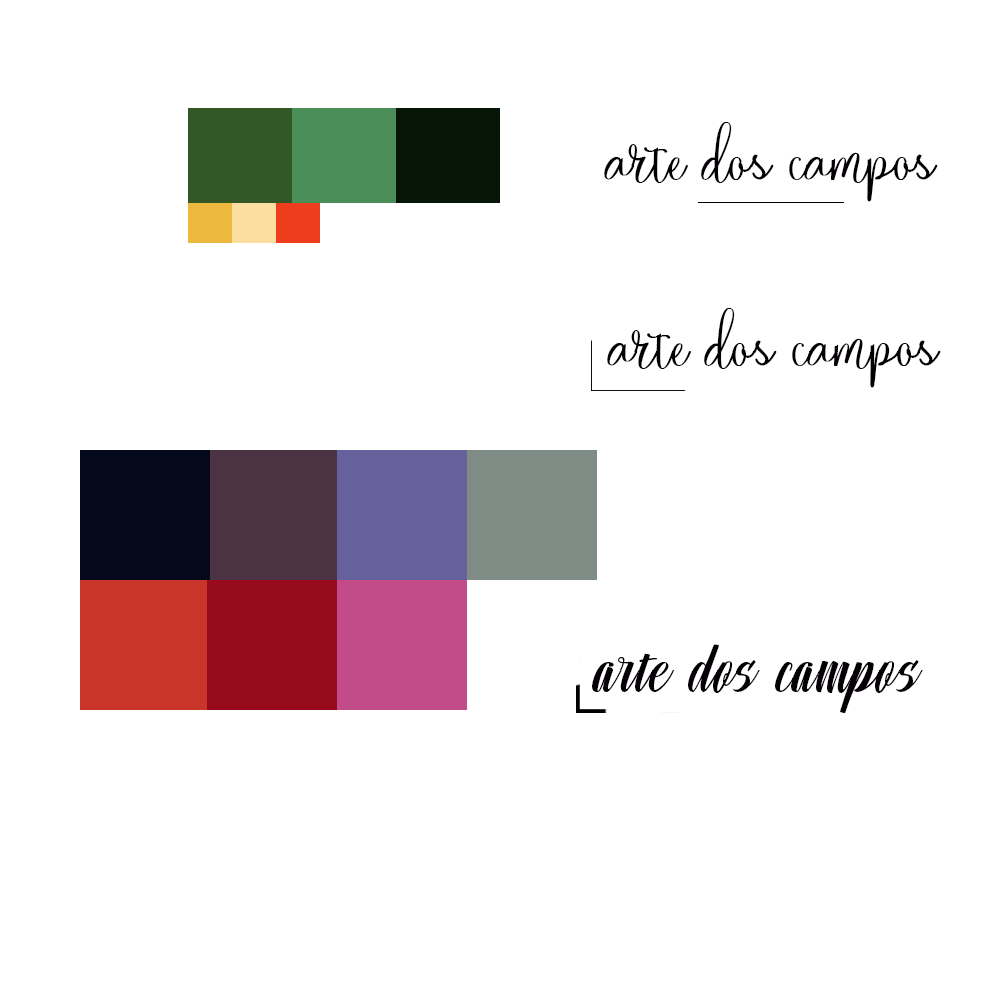
<style>
.page{position:relative;width:1000px;height:1000px;background:#ffffff}
.page>*{position:absolute;margin:0}
.t1{font:72px "Nature";color:#050006}
.t2{font:72px "Unimate-Script";color:#050006}
</style>
<div class="page">
<p class="t1" style="left:604px;top:122px;width:334px;height:80px">arte dos campos</p>
<p class="t1" style="left:607px;top:308px;width:334px;height:80px">arte dos campos</p>
<p class="t2" style="left:592px;top:644px;width:331px;height:69px">arte dos campos</p>
</div>
